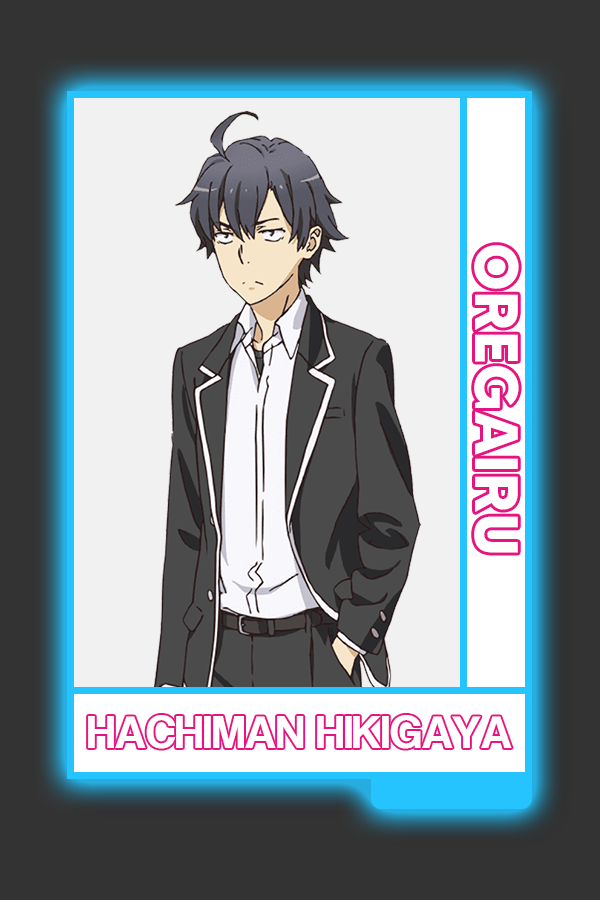
<style>
.page{position:relative;width:600px;height:900px;background:#333333}
.page>*{position:absolute;margin:0}
.t1{font:61.1px "MADETOMMY-Bold";color:#ffffff}
.t2{font:47.7px "CoolveticaRg-Regular";color:#ffffff}
</style>
<div class="page">
<p class="t1" style="left:474px;top:245px;width:45px;height:308px;rotate:90deg">OREGAIRU</p>
<p class="t2" style="left:88px;top:715px;width:424px;height:34px">HACHIMAN HIKIGAYA</p>
</div>
